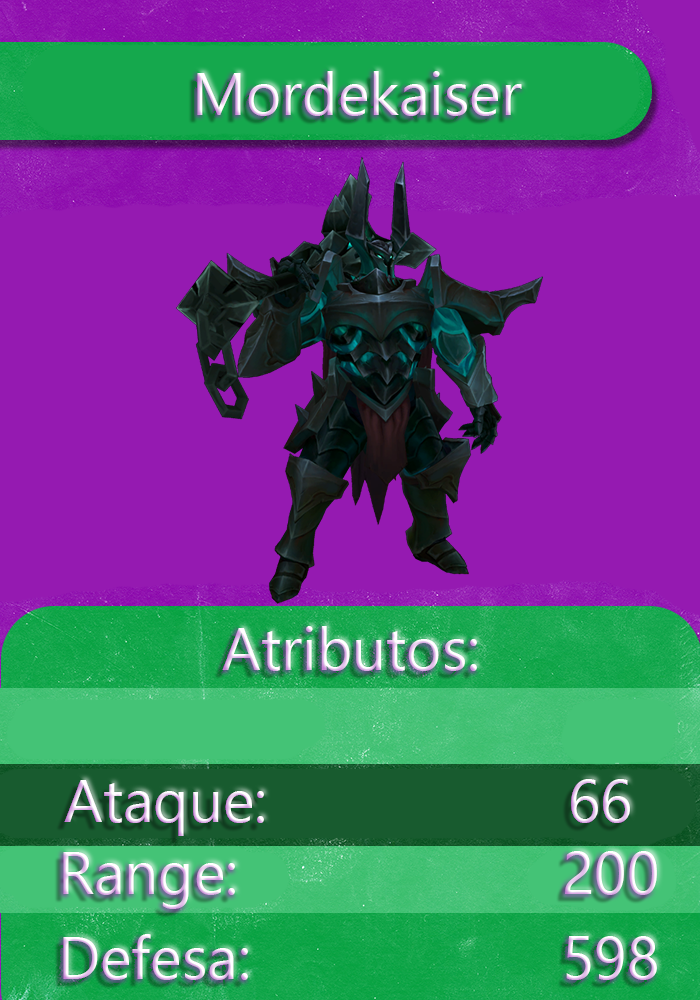
<style>
.page{position:relative;width:700px;height:1000px;background:#951ab1}
.page>*{position:absolute;margin:0}
.t1{font:60px "Ebrima"}
</style>
<div class="page">
<p class="t1" style="left:197px;top:71px;width:325px;height:45px">Mordekaiser</p>
<p class="t1" style="left:222px;top:626px;width:255px;height:45px">Atributos:</p>
<p class="t1" style="left:64px;top:779px;width:566px;height:57px">Ataque:         66</p>
<p class="t1" style="left:63px;top:851px;width:594px;height:58px">Range:         200</p>
<p class="t1" style="left:63px;top:934px;width:594px;height:46px">Defesa:         598</p>
</div>
